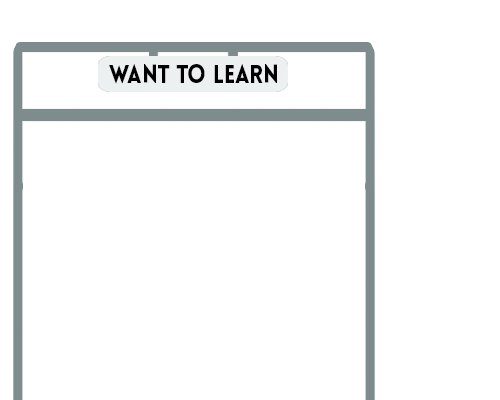
<style>
.page{position:relative;width:500px;height:400px;background:#ffffff}
.page>*{position:absolute;margin:0}
.t1{font:25px "LoveloBlack";color:#000000;scale:0.89 1}
</style>
<div class="page">
<p class="t1" style="left:109px;top:64px;width:168px;height:20px">want to learn</p>
</div>
